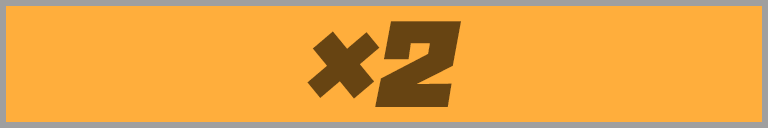
<style>
.page{position:relative;width:768px;height:128px;background:#ffae3c}
.page>*{position:absolute;margin:0}
.t1{font:91.7px "GN-KMBFont-UB-NewstyleKanaA";color:#674412;font-style:italic}
</style>
<div class="page">
<p class="t1" style="left:307px;top:21px;width:154px;height:86px">×2</p>
</div>
